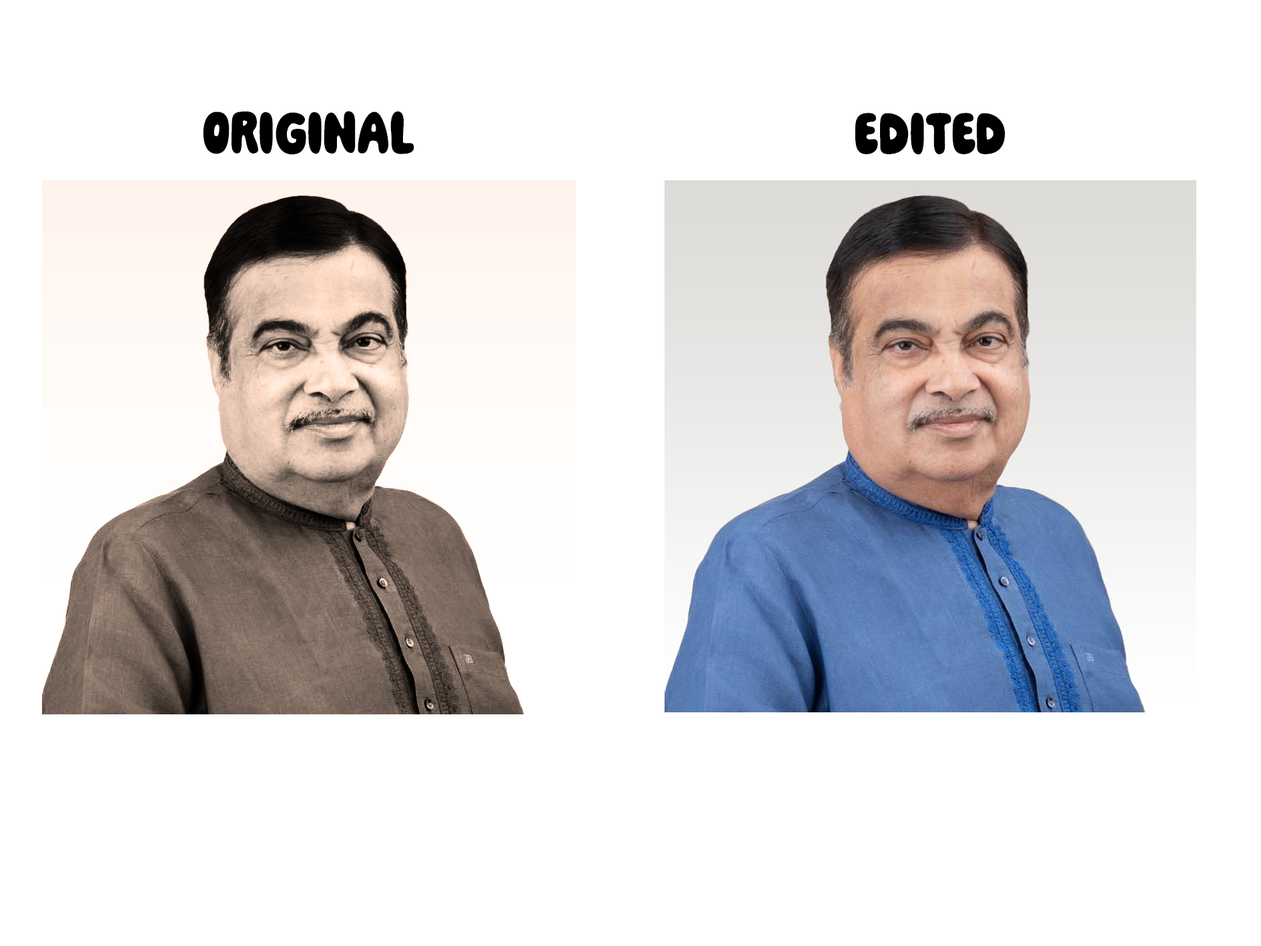
<style>
.page{position:relative;width:1261px;height:946px;background:#ffffff}
.page>*{position:absolute;margin:0}
.t1{font:66.7px "PaindeMie-Regular";color:#000000}
</style>
<div class="page">
<p class="t1" style="left:203px;top:111px;width:211px;height:44px">original</p>
<p class="t1" style="left:855px;top:113px;width:151px;height:42px">edited</p>
</div>
